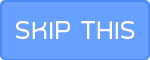
<style>
.page{position:relative;width:150px;height:60px;background:#67a0ff}
.page>*{position:absolute;margin:0}
.t1{font:30.1px "SuperspaceRegular";color:#ffffff}
</style>
<div class="page">
<p class="t1" style="left:15px;top:21px;width:120px;height:18px">SKIP THIS</p>
</div>
